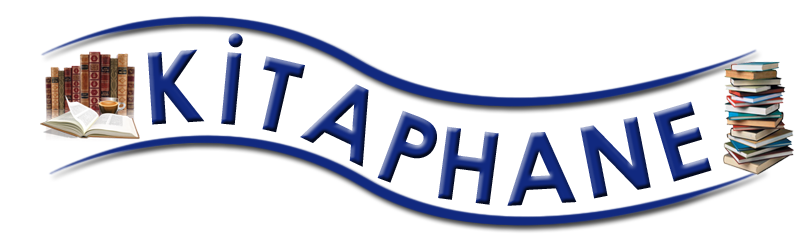
<style>
.page{position:relative;width:800px;height:250px;background:#ffffff}
.page>*{position:absolute;margin:0}
.t1{font:100px "CenturyGothic-Bold";letter-spacing:0.075em}
.t2{font:100px "ComicSansMS-Bold";letter-spacing:0.075em}
</style>
<div class="page">
<p class="t1" style="left:147px;top:33px;width:565px;height:173px">KİTAPHANE <span class="t2"> KİTAPHANE</span></p>
</div>
